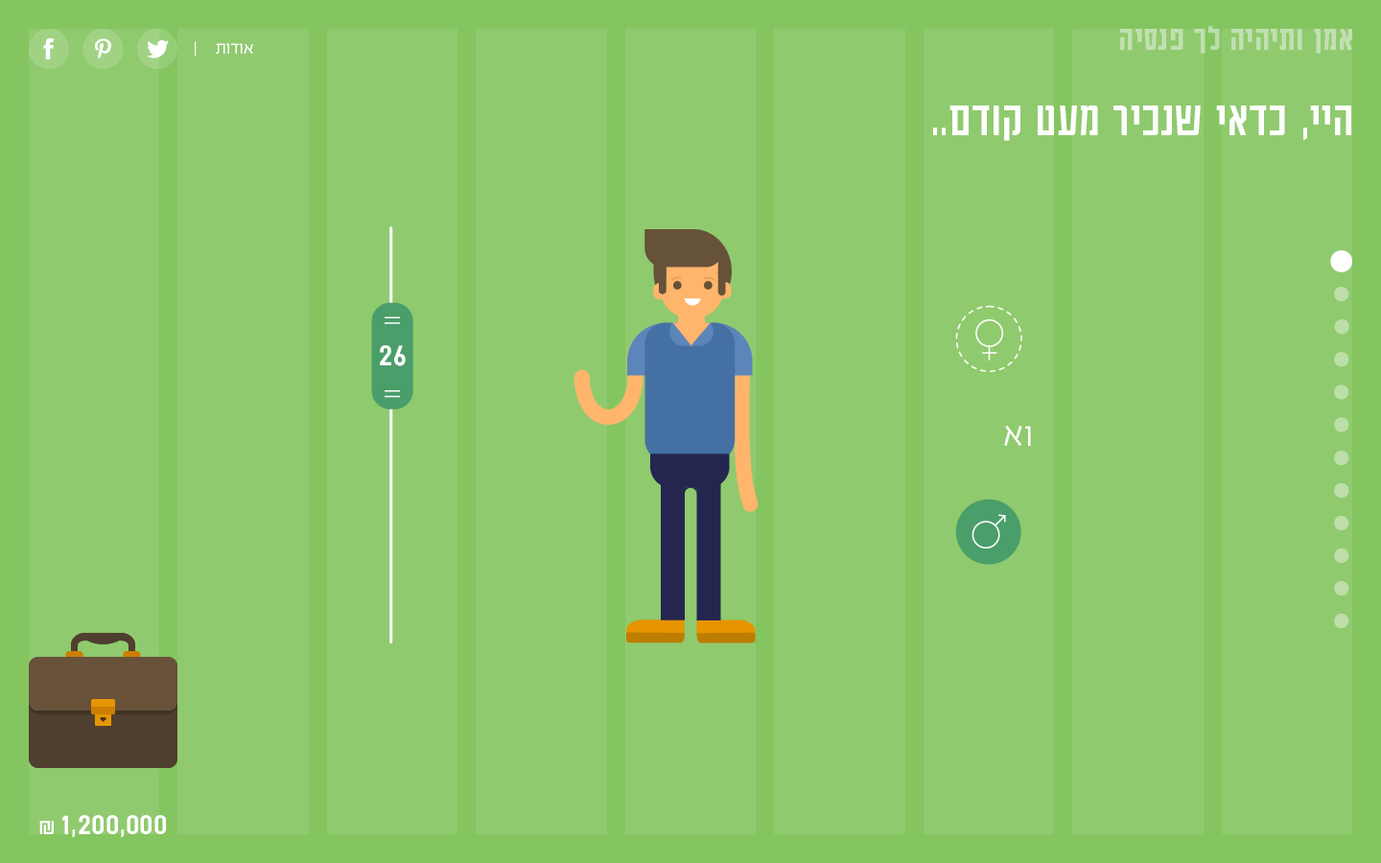
<style>
.page{position:relative;width:1381px;height:863px;background:#90ca6e}
.page>*{position:absolute;margin:0}
.t1{font:37.8px "AdumaFOT-Medium";color:#c1e0b1}
.t2{font:19.2px "EzerBlock_OE-Light";color:#ffffff}
.t3{font:53.8px "AdumaFOT-Regular";color:#ffffff}
.t4{font:35.9px "AdumaFOT-Regular";letter-spacing:-0.04em;color:#ffffff;scale:0.94 1}
.t5{font:38.4px "EzerBlock_OE-Light";color:#ffffff}
.t6{font:33.6px "AdumaFOT-Regular";color:#ffffff}
.t7{font:24px "AdumaFOT-Regular";color:#ffffff}
</style>
<div class="page">
<p class="t1" style="left:1120px;top:26px;width:232px;height:28px">אמן ותיהיה לך פנסיה</p>
<p class="t2" style="left:195px;top:41px;width:58px;height:16px">אודות     |</p>
<p class="t3" style="left:933px;top:106px;width:419px;height:35px">היי, כדאי שנכיר מעט קודם..</p>
<p class="t4" style="left:380px;top:345px;width:26px;height:21px">26</p>
<p class="t5" style="left:1004px;top:426px;width:27px;height:20px">או</p>
<p class="t6" style="left:39px;top:815px;width:127px;height:23px">1,200,000<span class="t7"> ₪</span></p>
</div>
